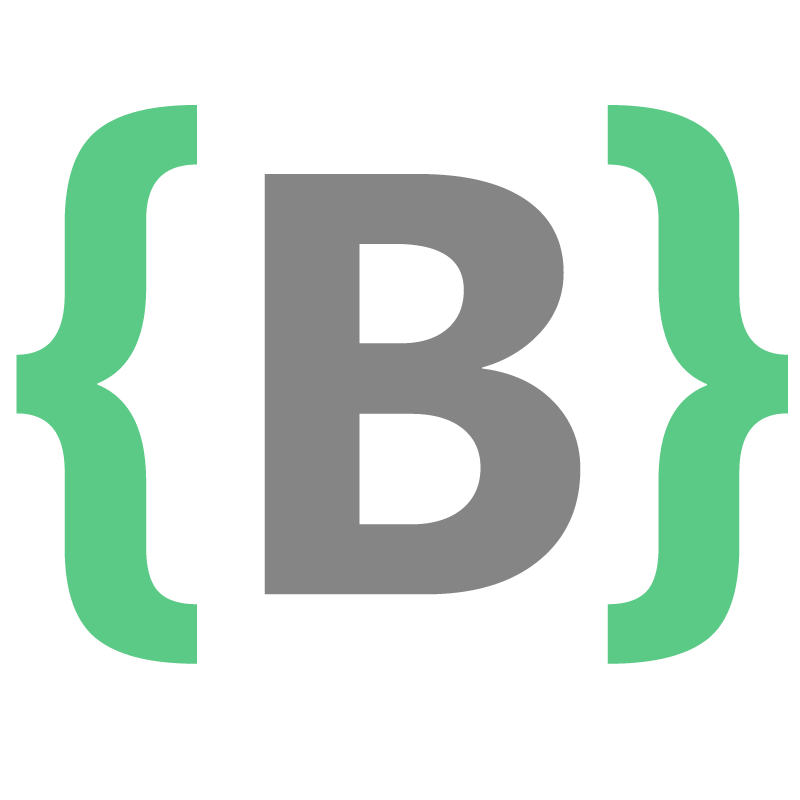
<style>
.page{position:relative;width:800px;height:800px;background:#ffffff}
.page>*{position:absolute;margin:0}
.t1{font:650px "SegoeUI-Bold";color:#5cca87}
.t2{font:600px "SegoeUI-Bold";color:#858585}
</style>
<div class="page">
<p class="t1" style="left:16px;top:105px;width:772px;height:559px">{  }</p>
<p class="t2" style="left:264px;top:174px;width:317px;height:421px">B</p>
</div>
